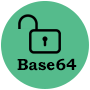
<style>
.page{position:relative;width:90px;height:90px;background:#55bb8c}
.page>*{position:absolute;margin:0}
.t1{font:16px "BookmanOldStyle-Bold";color:#000000}
</style>
<div class="page">
<p class="t1" style="left:17px;top:58px;width:60px;height:13px">Base64</p>
</div>
